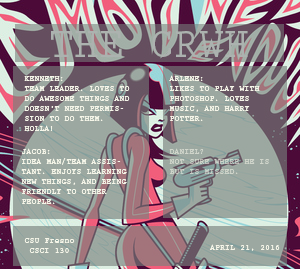
<style>
.page{position:relative;width:300px;height:269px}
.page>*{position:absolute;margin:0}
.t1{font:41.7px "PrestigeEliteStd-Bd";color:#acb2af}
.t2{font:8.3px "PrestigeEliteStd-Bd";color:#f6f6e9}
</style>
<div class="page">
<p class="t1" style="left:51px;top:31px;width:197px;height:26px">THE CRWH</p>
<p class="t2" style="left:24px;top:76px;width:106px;height:55px">KENNETH:<br>TEAM LEADER. LOVES TO DO AWESOME THINGS AND DOESN’T NEED PERMISSION TO DO THEM. HOLLA!</p>
<p class="t2" style="left:169px;top:75px;width:91px;height:46px">ARLENE:<br>LIKES TO PLAY WITH PHOTOSHOP. LOVES MUSIC, AND HARRY POTTER.</p>
<p class="t2" style="left:21px;top:148px;width:106px;height:56px">JACOB:<br>IDEA MAN/TEAM ASSISTANT. ENJOYS LEARNING NEW THINGS, AND BEING FRIENDLY TO OTHER PEOPLE.</p>
<p class="t2" style="left:24px;top:238px;width:51px;height:15px;text-align:center">CSU Fresno<br>CSCI 130</p>
<p class="t2" style="left:209px;top:244px;width:71px;height:7px">APRIL 21, 2016</p>
</div>
